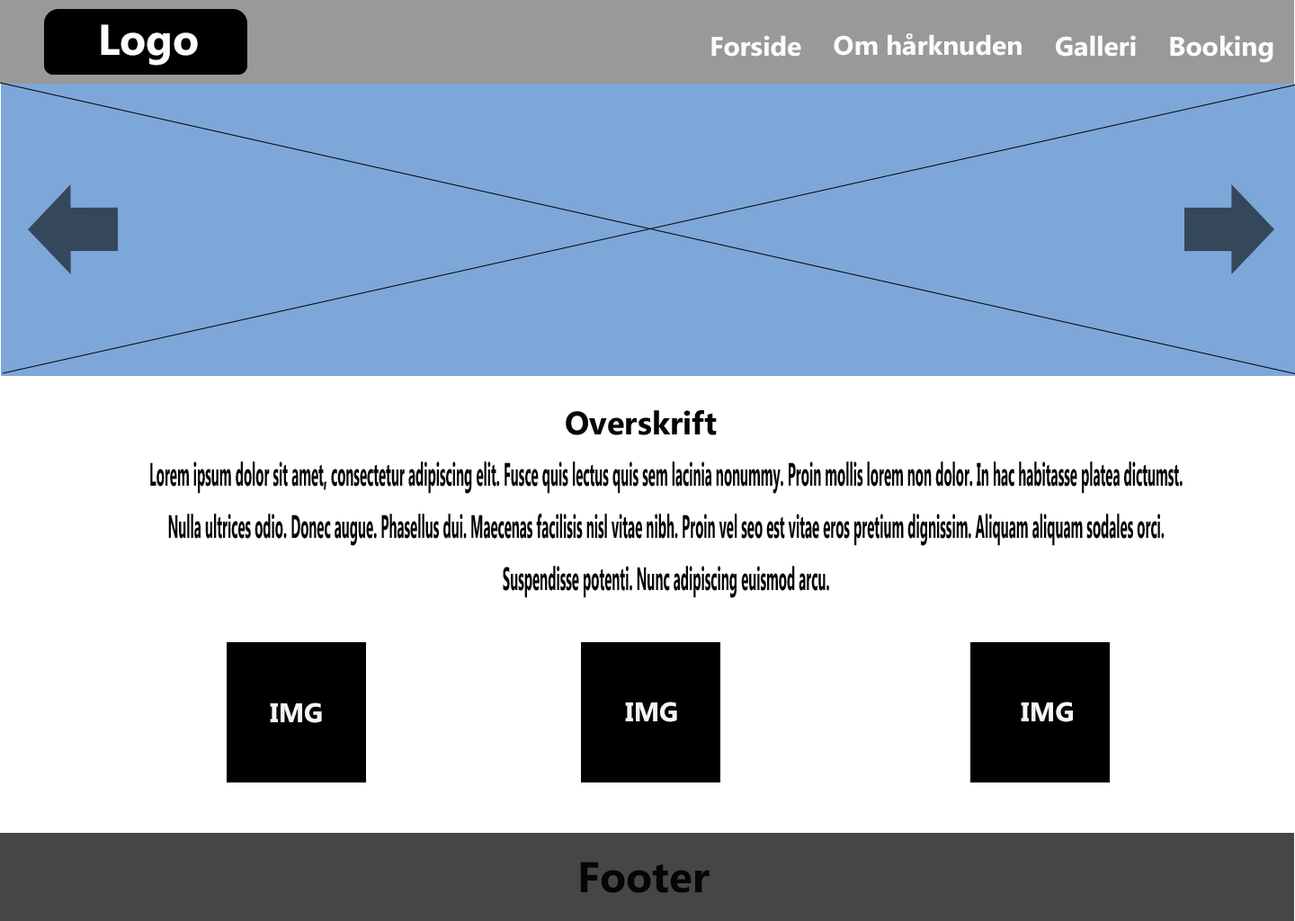
<style>
.page{position:relative;width:1295px;height:921px;background:#ffffff}
.page>*{position:absolute;margin:0}
.t1{font:43.2px "Ebrima-Bold";color:#fdfcfc}
.t2{font:27px "Ebrima-Bold";color:#fdfcfc}
.t3{font:32.4px "Ebrima-Bold";color:#050505}
.t4{font:32.4px/26.1px "Ebrima-Bold";color:#050505;scale:0.41 1}
.t5{font:27px "Ebrima-Bold";color:#f7f5f5}
.t6{font:43.2px "Ebrima-Bold";color:#050505}
</style>
<div class="page">
<p class="t1" style="left:101px;top:24px;width:97px;height:42px">Logo</p>
<p class="t2" style="left:711px;top:35px;width:90px;height:22px">Forside</p>
<p class="t2" style="left:834px;top:33px;width:188px;height:23px">Om hårknuden</p>
<p class="t2" style="left:1056px;top:35px;width:80px;height:22px">Galleri</p>
<p class="t2" style="left:1170px;top:35px;width:103px;height:28px">Booking</p>
<p class="t3" style="left:566px;top:410px;width:151px;height:25px">Overskrift</p>
<p class="t4" style="left:150px;top:461px;width:1033px;height:137px;text-align:center">Lorem ipsum dolor sit amet, consectetur adipiscing elit. Fusce quis lectus quis sem lacinia nonummy. Proin mollis lorem non dolor. In hac habitasse platea dictumst. <br><br>Nulla ultrices odio. Donec augue. Phasellus dui. Maecenas facilisis nisl vitae nibh. Proin vel seo est vitae eros pretium dignissim. Aliquam aliquam sodales orci. <br><br>Suspendisse potenti. Nunc adipiscing euismod arcu.</p>
<p class="t5" style="left:625px;top:701px;width:52px;height:21px">IMG</p>
<p class="t5" style="left:1021px;top:701px;width:52px;height:21px">IMG</p>
<p class="t5" style="left:270px;top:702px;width:52px;height:21px">IMG</p>
<p class="t6" style="left:580px;top:861px;width:130px;height:32px">Footer</p>
</div>
